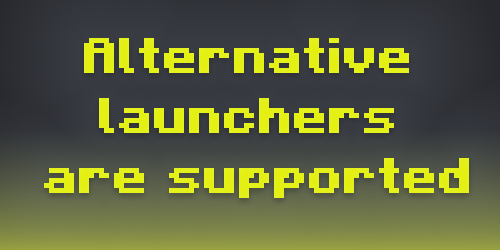
<style>
.page{position:relative;width:500px;height:250px}
.page>*{position:absolute;margin:0}
.t1{font:50px "Minecraft-Bold";color:#e4f018}
</style>
<div class="page">
<p class="t1" style="left:44px;top:38px;width:425px;height:160px;text-align:center">Alternative <br>launchers <br>are supported</p>
</div>
